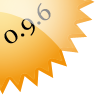
<style>
.page{position:relative;width:100px;height:100px;background:#ffffff}
.page>*{position:absolute;margin:0}
.t1{font:24px "Georgia"}
</style>
<div class="page">
<p class="t1" style="left:4px;top:3px;width:47px;height:41px;rotate:-35deg">0.9.6</p>
</div>
